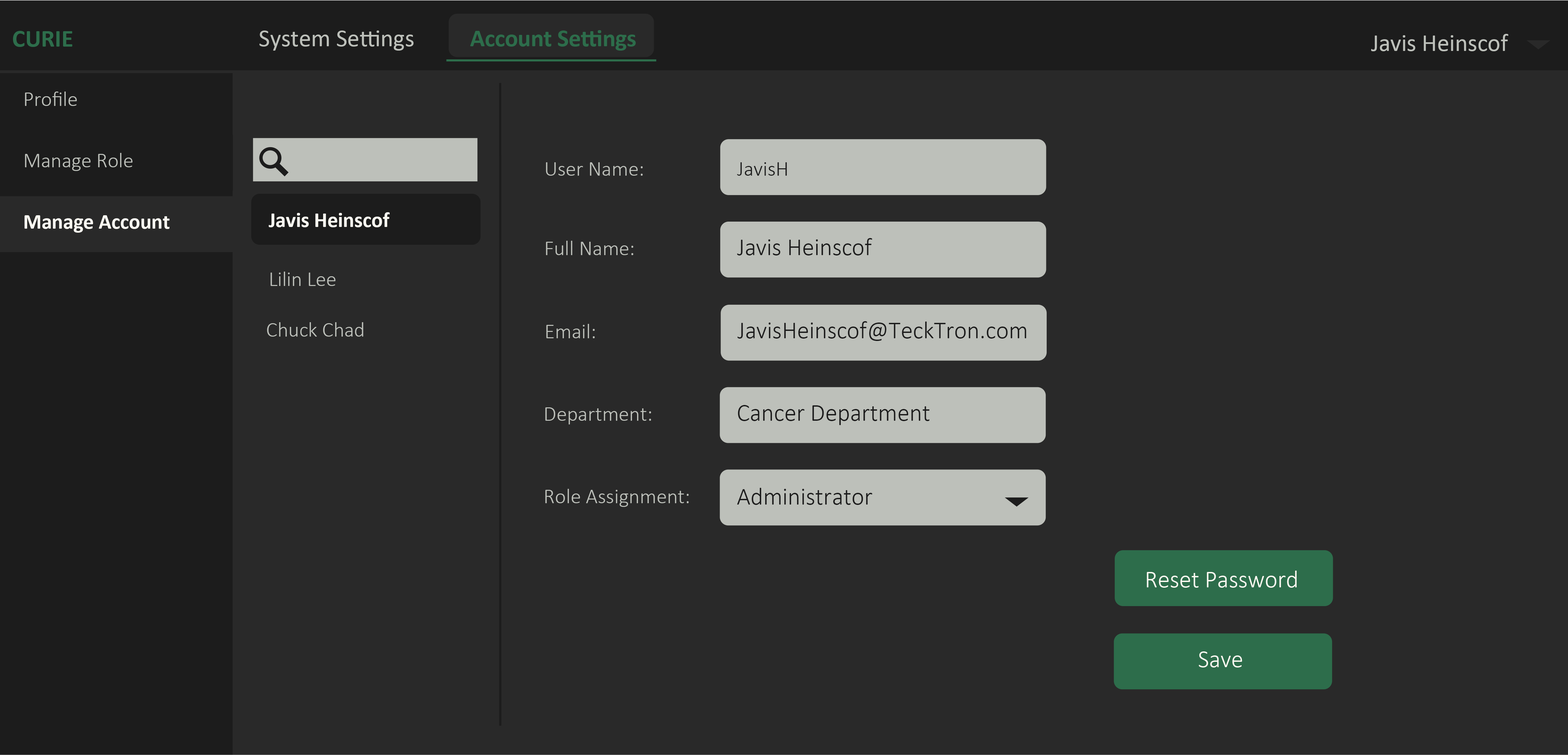
<style>
.page{position:relative;width:1568px;height:755px;background:#292929}
.page>*{position:absolute;margin:0}
.t1{font:24.5px "Calibri-Bold";color:#2d6d4b}
.t2{font:24.5px "Calibri";color:#bdc0ba}
.t3{font:24.5px "Calibri-Bold";letter-spacing:-0.008em;color:#2d6d4b}
.t4{font:24.5px "Calibri";letter-spacing:-0.016em;color:#bdc0ba}
.t5{font:24.5px "Calibri";letter-spacing:-0.007em;color:#bdc0ba}
.t6{font:21px "Calibri-Light";color:#bdc0ba}
.t7{font:21px "Calibri-Light";letter-spacing:0.004em;color:#bdc0ba}
.t8{font:21px "Calibri-Light";letter-spacing:0.004em;color:#1c1c1c}
.t9{font:21px "Calibri-Bold";color:#fcfaf2}
.t10{font:24.5px "Calibri-Light";color:#1c1c1c}
.t11{font:24.5px "Calibri-Light";letter-spacing:-0.016em;color:#1c1c1c}
.t12{font:24.5px "Calibri-Light";letter-spacing:-0.007em;color:#1c1c1c}
.t13{font:24.5px "Calibri-Light";color:#fcfaf2}
</style>
<div class="page">
<p class="t1" style="left:13px;top:31px;width:59px;height:16px">CURIE</p>
<p class="t2" style="left:259px;top:31px;width:155px;height:20px">System Settings</p>
<p class="t3" style="left:470px;top:30px;width:166px;height:21px">Account Settings</p>
<p class="t2" style="left:1371px;top:34px;width:137px;height:17px">J<span class="t4">a</span>vis Heins<span class="t5">c</span>of</p>
<p class="t6" style="left:25px;top:92px;width:52px;height:14px">Profile</p>
<p class="t6" style="left:25px;top:153px;width:108px;height:18px">Manage Role</p>
<p class="t7" style="left:546px;top:162px;width:97px;height:14px">User Name:</p>
<p class="t8" style="left:737px;top:162px;width:50px;height:14px">JavisH</p>
<p class="t9" style="left:24px;top:215px;width:146px;height:18px">Manage Account</p>
<p class="t9" style="left:269px;top:212px;width:121px;height:15px">Javis Heinscof</p>
<p class="t7" style="left:546px;top:241px;width:87px;height:14px">Full Name:</p>
<p class="t10" style="left:737px;top:238px;width:135px;height:18px">J<span class="t11">a</span>vis Heins<span class="t12">c</span>of</p>
<p class="t6" style="left:270px;top:272px;width:65px;height:14px">Lilin Lee</p>
<p class="t6" style="left:267px;top:322px;width:96px;height:15px">Chuck Chad</p>
<p class="t7" style="left:546px;top:324px;width:49px;height:14px">Email:</p>
<p class="t10" style="left:737px;top:321px;width:289px;height:20px">J<span class="t11">a</span>visHeins<span class="t12">c</span>of@TeckTron.com</p>
<p class="t7" style="left:545px;top:408px;width:106px;height:17px">Department:</p>
<p class="t10" style="left:738px;top:405px;width:192px;height:20px">Cancer Department</p>
<p class="t7" style="left:545px;top:489px;width:144px;height:18px">Role Assignment:</p>
<p class="t10" style="left:737px;top:488px;width:135px;height:17px">Administrator</p>
<p class="t13" style="left:1147px;top:571px;width:150px;height:17px">Reset Password</p>
<p class="t13" style="left:1199px;top:652px;width:43px;height:16px">Save</p>
</div>
